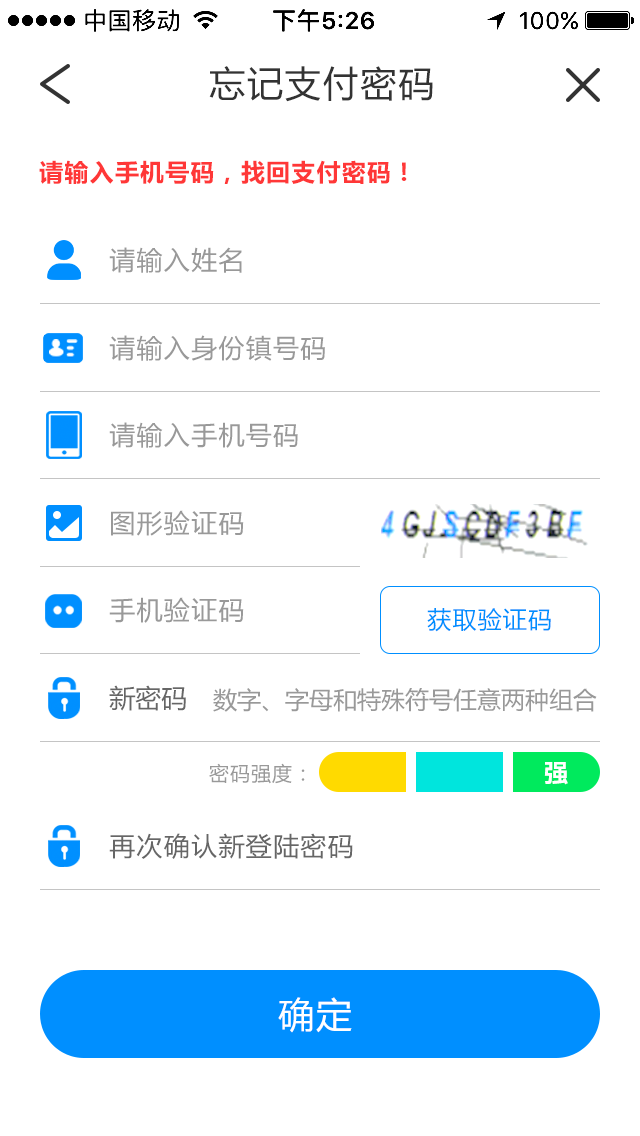
<style>
.page{position:relative;width:640px;height:1136px;background:#ffffff}
.page>*{position:absolute;margin:0}
.t1{font:36px "MicrosoftYaHei";letter-spacing:0.05em;color:#333333}
.t2{font:24px "MicrosoftYaHei-Bold";letter-spacing:0.05em;color:#ff3737}
.t3{font:26px "MicrosoftYaHei";letter-spacing:0.05em;color:#999999}
.t4{font:24px "MicrosoftYaHei";letter-spacing:0.05em;color:#008fff}
.t5{font:26px "MicrosoftYaHei";color:#666666}
.t6{font:24px "MicrosoftYaHei";color:#999999}
.t7{font:20px "MicrosoftYaHei";letter-spacing:0.05em;color:#999999}
.t8{font:24px "MicrosoftYaHei-Bold";letter-spacing:0.05em;color:#ffffff}
.t9{font:26px "MicrosoftYaHei";letter-spacing:0.05em;color:#666666}
.t10{font:36px "MicrosoftYaHei";letter-spacing:0.05em;color:#ffffff}
</style>
<div class="page">
<p class="t1" style="left:209px;top:66px;width:224px;height:36px">忘记支付密码</p>
<p class="t2" style="left:39px;top:160px;width:368px;height:24px">请输入手机号码，找回支付密码！</p>
<p class="t3" style="left:109px;top:247px;width:133px;height:26px">请输入姓名</p>
<p class="t3" style="left:109px;top:335px;width:216px;height:26px">请输入身份镇号码</p>
<p class="t3" style="left:109px;top:422px;width:189px;height:26px">请输入手机号码</p>
<p class="t3" style="left:111px;top:510px;width:133px;height:26px">图形验证码</p>
<p class="t3" style="left:109px;top:597px;width:135px;height:26px">手机验证码</p>
<p class="t4" style="left:427px;top:608px;width:124px;height:24px">获取验证码</p>
<p class="t5" style="left:109px;top:685px;width:77px;height:26px">新密码</p>
<p class="t6" style="left:213px;top:688px;width:384px;height:24px">数字、字母和特殊符号任意两种组合</p>
<p class="t7" style="left:209px;top:763px;width:96px;height:21px">密码强度：</p>
<p class="t8" style="left:544px;top:762px;width:24px;height:23px">强</p>
<p class="t9" style="left:109px;top:833px;width:244px;height:26px">再次确认新登陆密码</p>
<p class="t10" style="left:278px;top:997px;width:74px;height:36px">确定</p>
</div>
